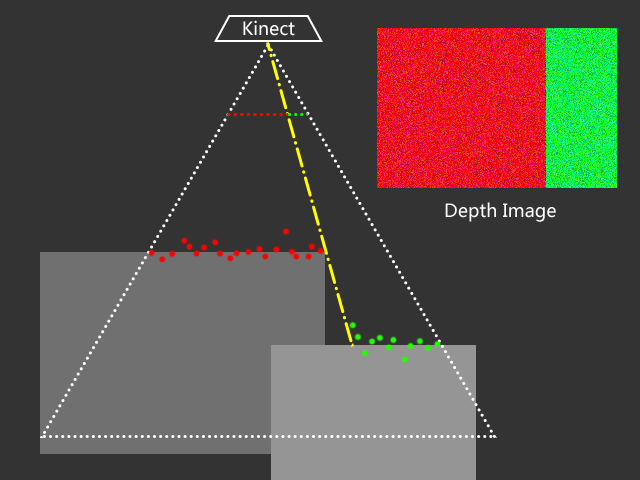
<style>
.page{position:relative;width:640px;height:480px;background:#333333}
.page>*{position:absolute;margin:0}
.t1{font:18px "MicrosoftYaHei";color:#ffffff}
</style>
<div class="page">
<p class="t1" style="left:243px;top:20px;width:52px;height:16px">Kinect</p>
<p class="t1" style="left:445px;top:202px;width:111px;height:20px">Depth Image</p>
</div>
